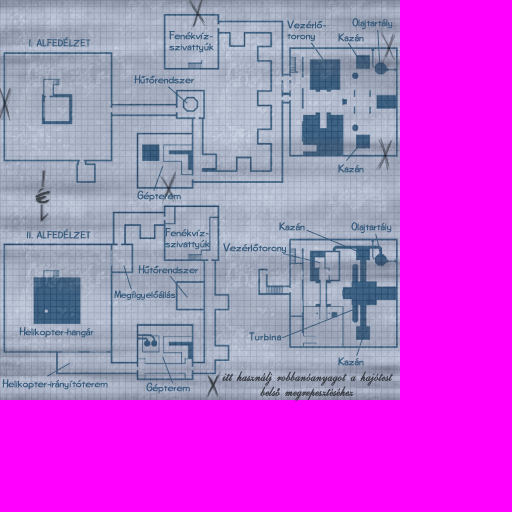
<style>
.page{position:relative;width:512px;height:512px;background:#ff00ff}
.page>*{position:absolute;margin:0}
.t1{font:11px/11px "Diego-Regular";color:#375b7c}
.t2{font:11px "Diego-Regular";color:#375b7c}
.t3{font:9.6px "Diego-Regular";letter-spacing:0.05em;color:#3a5d7e;scale:1.06 1}
.t4{font:10.3px "Diego-Regular";color:#375b7c}
.t5{font:11px "Diego-Regular";letter-spacing:0.04em;color:#375b7c}
.t6{font:14.9px/15px "ILSScript";color:#3c3f47;font-weight:bold;scale:0.83 1}
</style>
<div class="page">
<p class="t1" style="left:169px;top:30px;width:45px;height:23px">Fenékvíz-<br>szivattyúk</p>
<p class="t1" style="left:287px;top:20px;width:39px;height:22px">Vezérlő-<br>torony</p>
<p class="t2" style="left:352px;top:18px;width:41px;height:11px">Olajtartály</p>
<p class="t3" style="left:29px;top:37px;width:62px;height:10px">I. ALFEDÉLZET</p>
<p class="t2" style="left:338px;top:33px;width:26px;height:9px">Kazán</p>
<p class="t2" style="left:134px;top:75px;width:60px;height:9px">Hűtőrendszer</p>
<p class="t2" style="left:338px;top:164px;width:26px;height:9px">Kazán</p>
<p class="t2" style="left:137px;top:190px;width:44px;height:12px">Gépterem</p>
<p class="t2" style="left:279px;top:222px;width:26px;height:9px">Kazán</p>
<p class="t2" style="left:351px;top:222px;width:41px;height:11px">Olajtartály</p>
<p class="t3" style="left:27px;top:229px;width:64px;height:10px">II. ALFEDÉLZET</p>
<p class="t1" style="left:165px;top:227px;width:45px;height:23px">Fenékvíz-<br>szivattyúk</p>
<p class="t2" style="left:223px;top:243px;width:63px;height:11px">Vezérlőtorony</p>
<p class="t2" style="left:138px;top:265px;width:60px;height:9px">Hűtőrendszer</p>
<p class="t4" style="left:114px;top:290px;width:62px;height:10px">Megfigyelőállás</p>
<p class="t2" style="left:19px;top:327px;width:75px;height:11px">Helikopter-hangár</p>
<p class="t5" style="left:249px;top:332px;width:32px;height:9px">Turbina</p>
<p class="t2" style="left:338px;top:357px;width:26px;height:9px">Kazán</p>
<p class="t6" style="left:222px;top:371px;width:172px;height:30px;text-align:center">itt használj robbanóanyagot a hajótest<br>belső megrepesztéséhez</p>
<p class="t2" style="left:2px;top:379px;width:106px;height:11px">Helikopter-irányítóterem</p>
<p class="t2" style="left:146px;top:382px;width:44px;height:12px">Gépterem</p>
</div>
